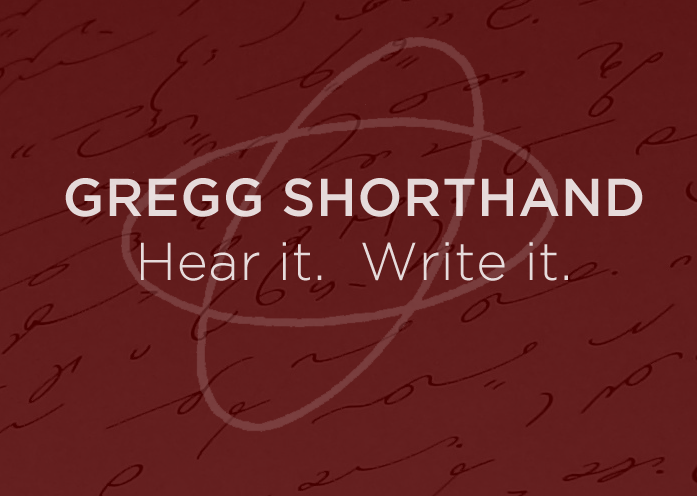
<style>
.page{position:relative;width:697px;height:496px}
.page>*{position:absolute;margin:0}
.t1{font:53.3px "GothamLight";letter-spacing:0.01em;color:#e6dada}
.t2{font:53.3px "GothamMedium";letter-spacing:0.01em;color:#e6dada}
</style>
<div class="page">
<p class="t1" style="left:65px;top:178px;width:578px;height:103px;text-align:center"><span class="t2">GREGG SHORTHAND<br></span>Hear it.  Write it.</p>
</div>
